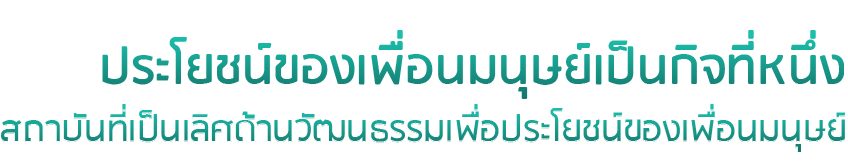
<style>
.page{position:relative;width:848px;height:162px;background:#ffffff}
.page>*{position:absolute;margin:0}
.t1{font:58.7px "RSU-Bold";color:#179789}
.t2{font:41.2px "RSU";color:#179889}
</style>
<div class="page">
<p class="t1" style="left:102px;top:30px;width:742px;height:69px">ประโยชน์ของเพื่อนมนุษย์เป็นกิจที่หนึ่ง</p>
<p class="t2" style="left:1px;top:104px;width:845px;height:48px">สถาบันที่เป็นเลิศด้านวัฒนธรรมเพื่อประโยชน์ของเพื่อนมนุษย์</p>
</div>
